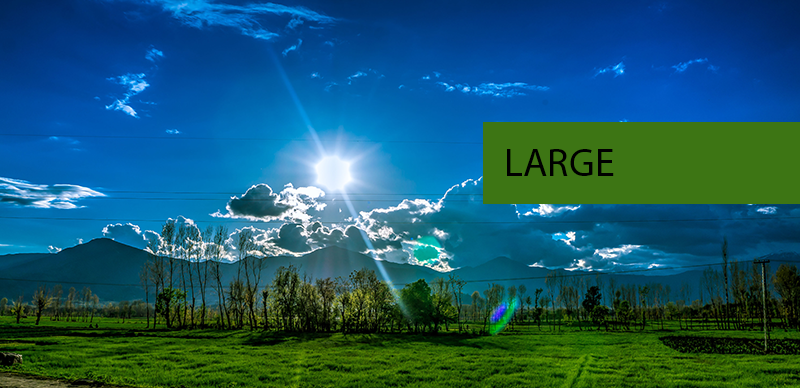
<style>
.page{position:relative;width:800px;height:388px}
.page>*{position:absolute;margin:0}
.t1{font:40px "MyriadPro-Regular";color:#000000}
</style>
<div class="page">
<p class="t1" style="left:507px;top:149px;width:107px;height:27px">LARGE</p>
</div>
